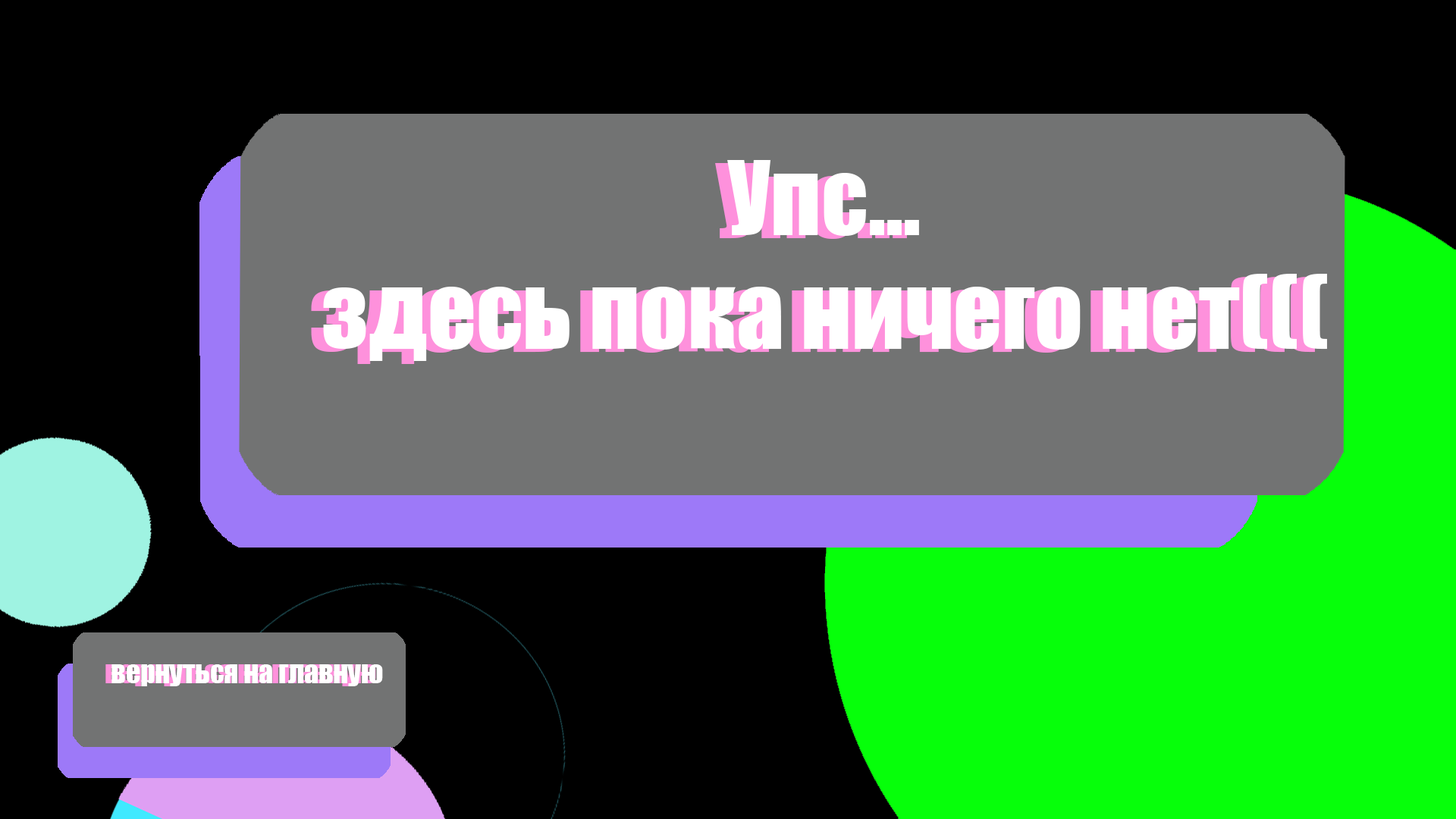
<style>
.page{position:relative;width:1456px;height:819px;background:#000000}
.page>*{position:absolute;margin:0}
.t1{font:94.8px "Impact"}
.t2{font:28.4px "Impact"}
.t3{font:28.4px "Impact";color:#ffffff}
</style>
<div class="page">
<p class="t1" style="left:311px;top:163px;width:1004px;height:201px;text-align:center">Упс... <br>здесь пока ничего нет(((</p>
<p class="t2" style="left:105px;top:664px;width:271px;height:22px">вернуться на главную</p>
<p class="t3" style="left:111px;top:664px;width:272px;height:22px">вернуться на главную</p>
</div>
